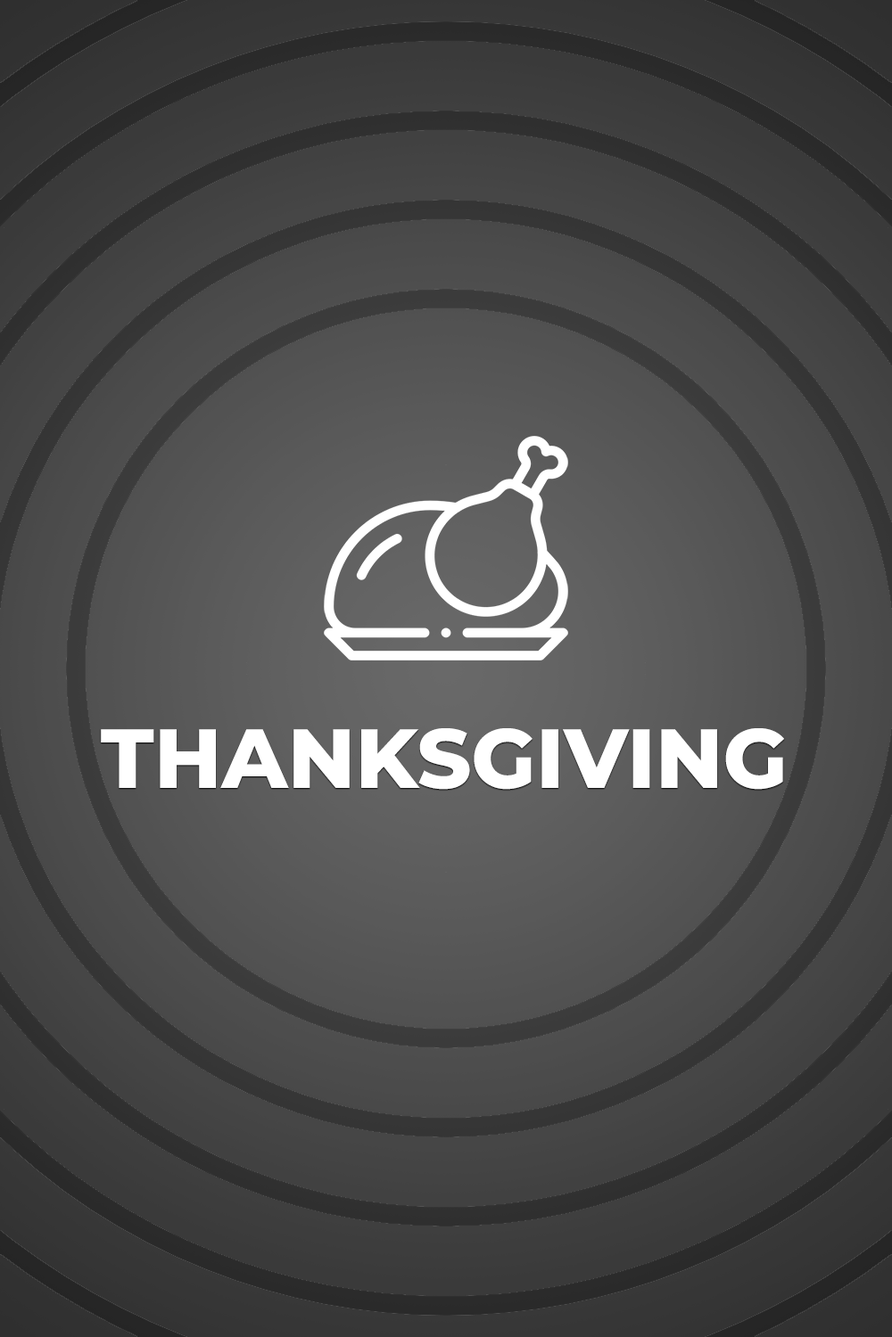
<style>
.page{position:relative;width:892px;height:1337px}
.page>*{position:absolute;margin:0}
.t1{font:83.8px "MontserratRoman-ExtraBold";color:#ffffff}
</style>
<div class="page">
<p class="t1" style="left:101px;top:728px;width:683px;height:62px">THANKSGIVING</p>
</div>
